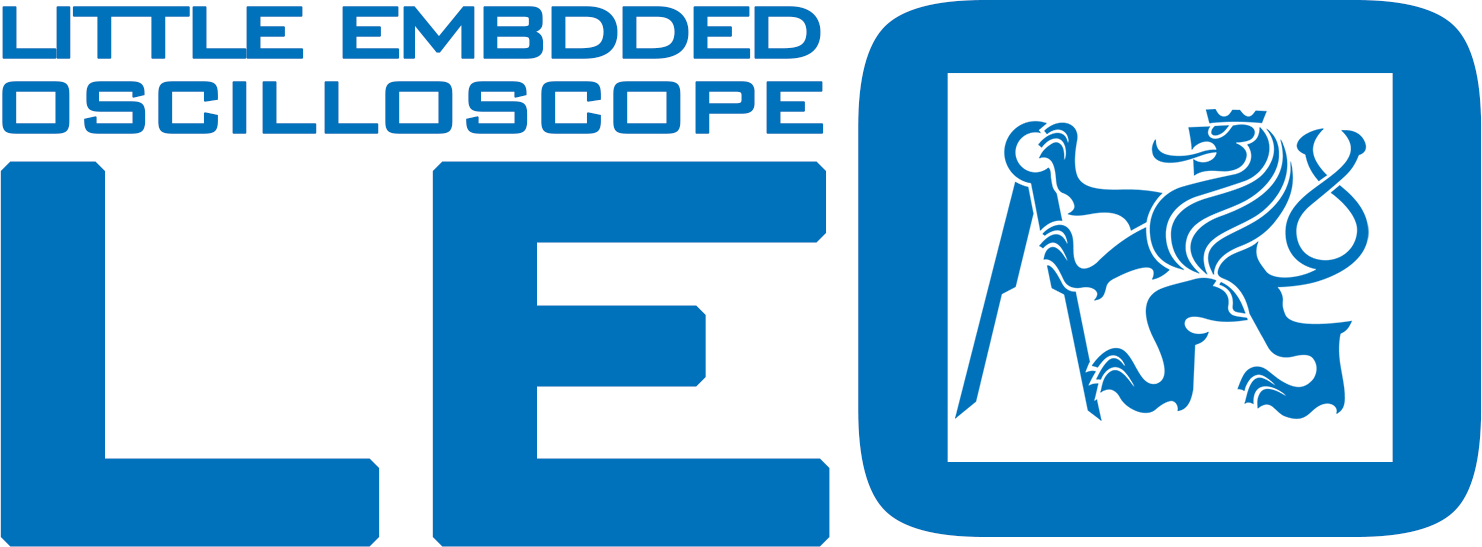
<style>
.page{position:relative;width:1482px;height:547px;background:#0071bb}
.page>*{position:absolute;margin:0}
.t1{font:708.2px "BankGothicBT-Medium";letter-spacing:-0.1em;color:#0071bb;font-weight:bold}
.t2{font:708.2px "BankGothicBT-Medium";letter-spacing:-0.25em;color:#0071bb;font-weight:bold}
.t3{font:1041.4px "BankGothicBT-Light";color:#0071bb}
.t4{font:119.5px/75px "BankGothicBT-Medium";letter-spacing:-0.125em;color:#0071bb;font-weight:bold}
.t5{font:119.5px/75px "BankGothicBT-Medium";letter-spacing:-0.065em;color:#0071bb;font-weight:bold}
</style>
<div class="page">
<p class="t1" style="left:0px;top:0px;width:1482px;height:547px">L<span class="t2">E</span><span class="t3">O</span></p>
<p class="t4" style="left:2px;top:6px;width:822px;height:128px;text-align:right">little embdded<br><span class="t5">oscilloscope</span></p>
</div>
